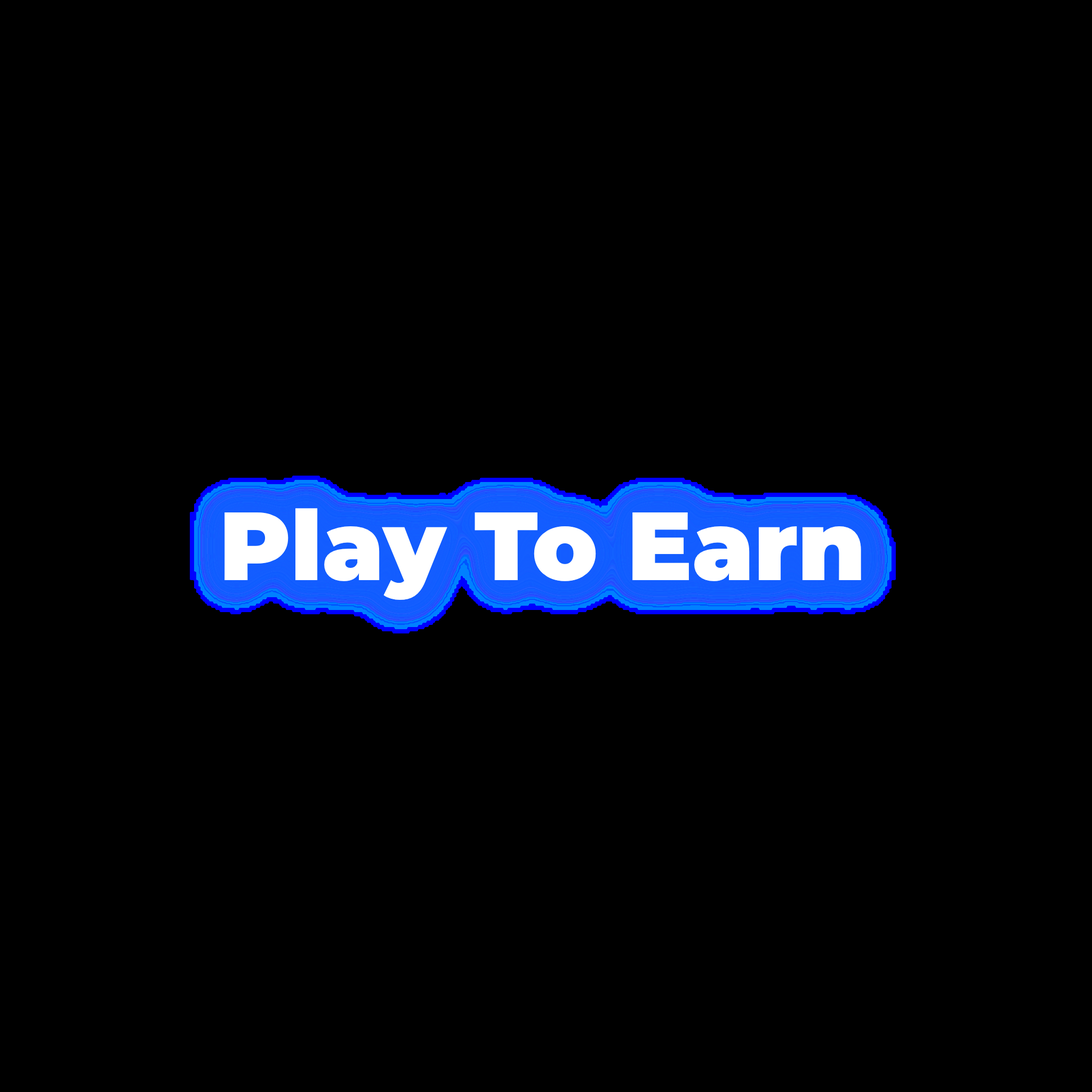
<style>
.page{position:relative;width:1092px;height:1092px;background:#000000}
.page>*{position:absolute;margin:0}
.t1{font:96.7px "Montserrat-Black";color:#ffffff}
</style>
<div class="page">
<p class="t1" style="left:0px;top:0px;width:1092px;height:1092px;text-align:center">Play To Earn</p>
</div>
